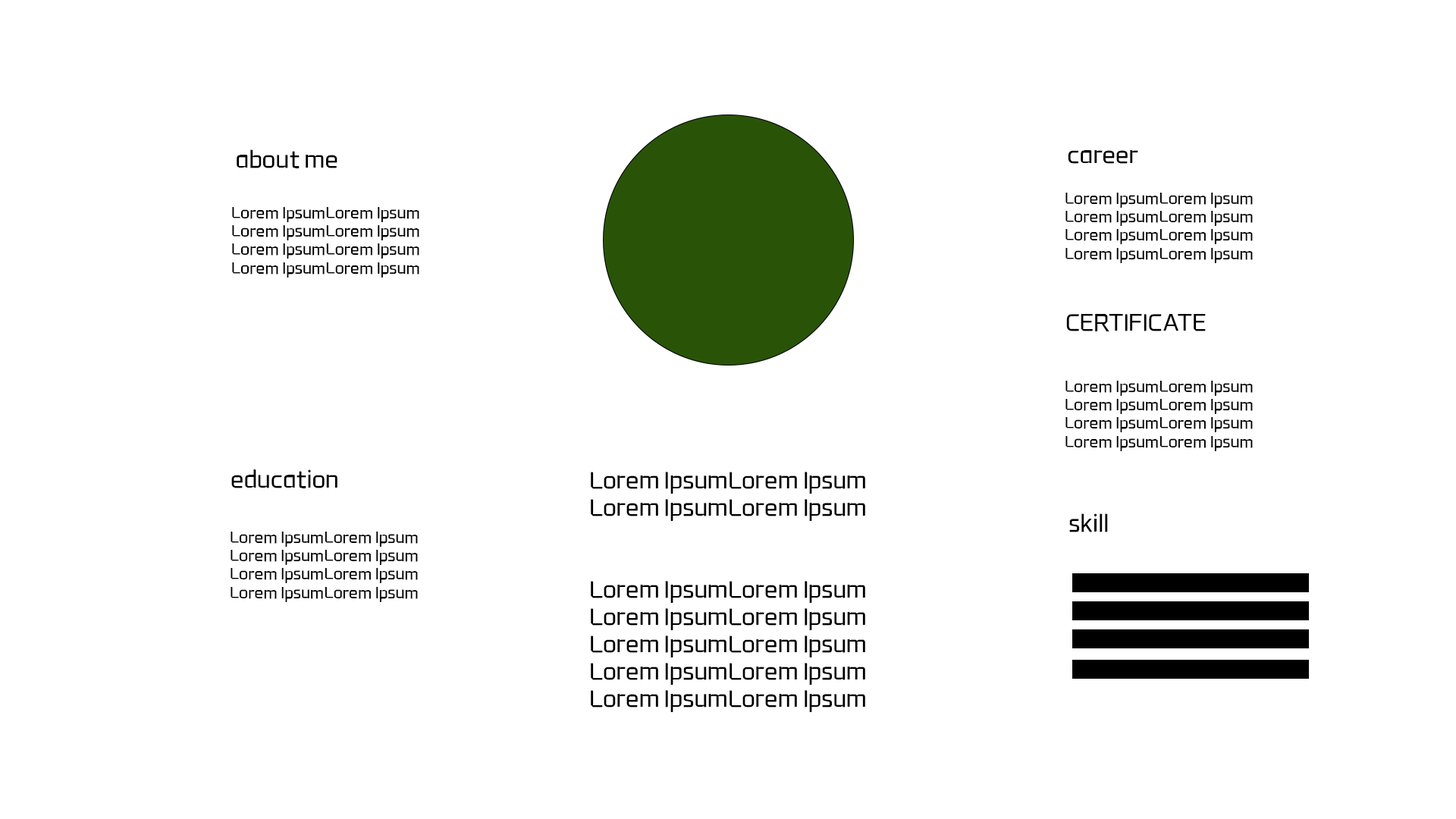
<style>
.page{position:relative;width:1456px;height:819px;background:#ffffff}
.page>*{position:absolute;margin:0}
.t1{font:22.7px "wamakeprice-regular";color:#000000}
.t2{font:15.4px "wamakeprice-regular";color:#000000}
</style>
<div class="page">
<p class="t1" style="left:237px;top:149px;width:100px;height:19px">about me</p>
<p class="t1" style="left:1068px;top:150px;width:70px;height:14px">career</p>
<p class="t2" style="left:1065px;top:192px;width:188px;height:71px">Lorem IpsumLorem Ipsum<br>Lorem IpsumLorem Ipsum<br>Lorem IpsumLorem Ipsum<br>Lorem IpsumLorem Ipsum</p>
<p class="t2" style="left:232px;top:206px;width:187px;height:72px">Lorem IpsumLorem Ipsum<br>Lorem IpsumLorem Ipsum<br>Lorem IpsumLorem Ipsum<br>Lorem IpsumLorem Ipsum</p>
<p class="t1" style="left:1066px;top:314px;width:140px;height:17px">CERTIFICATE</p>
<p class="t2" style="left:1065px;top:380px;width:188px;height:71px">Lorem IpsumLorem Ipsum<br>Lorem IpsumLorem Ipsum<br>Lorem IpsumLorem Ipsum<br>Lorem IpsumLorem Ipsum</p>
<p class="t1" style="left:231px;top:469px;width:106px;height:19px">education</p>
<p class="t1" style="left:591px;top:472px;width:274px;height:240px">Lorem IpsumLorem Ipsum<br>Lorem IpsumLorem Ipsum<br><br><br>Lorem IpsumLorem Ipsum<br>Lorem IpsumLorem Ipsum<br>Lorem IpsumLorem Ipsum<br>Lorem IpsumLorem Ipsum<br>Lorem IpsumLorem Ipsum</p>
<p class="t1" style="left:1069px;top:513px;width:39px;height:19px">skill</p>
<p class="t2" style="left:231px;top:531px;width:187px;height:71px">Lorem IpsumLorem Ipsum<br>Lorem IpsumLorem Ipsum<br>Lorem IpsumLorem Ipsum<br>Lorem IpsumLorem Ipsum</p>
</div>
